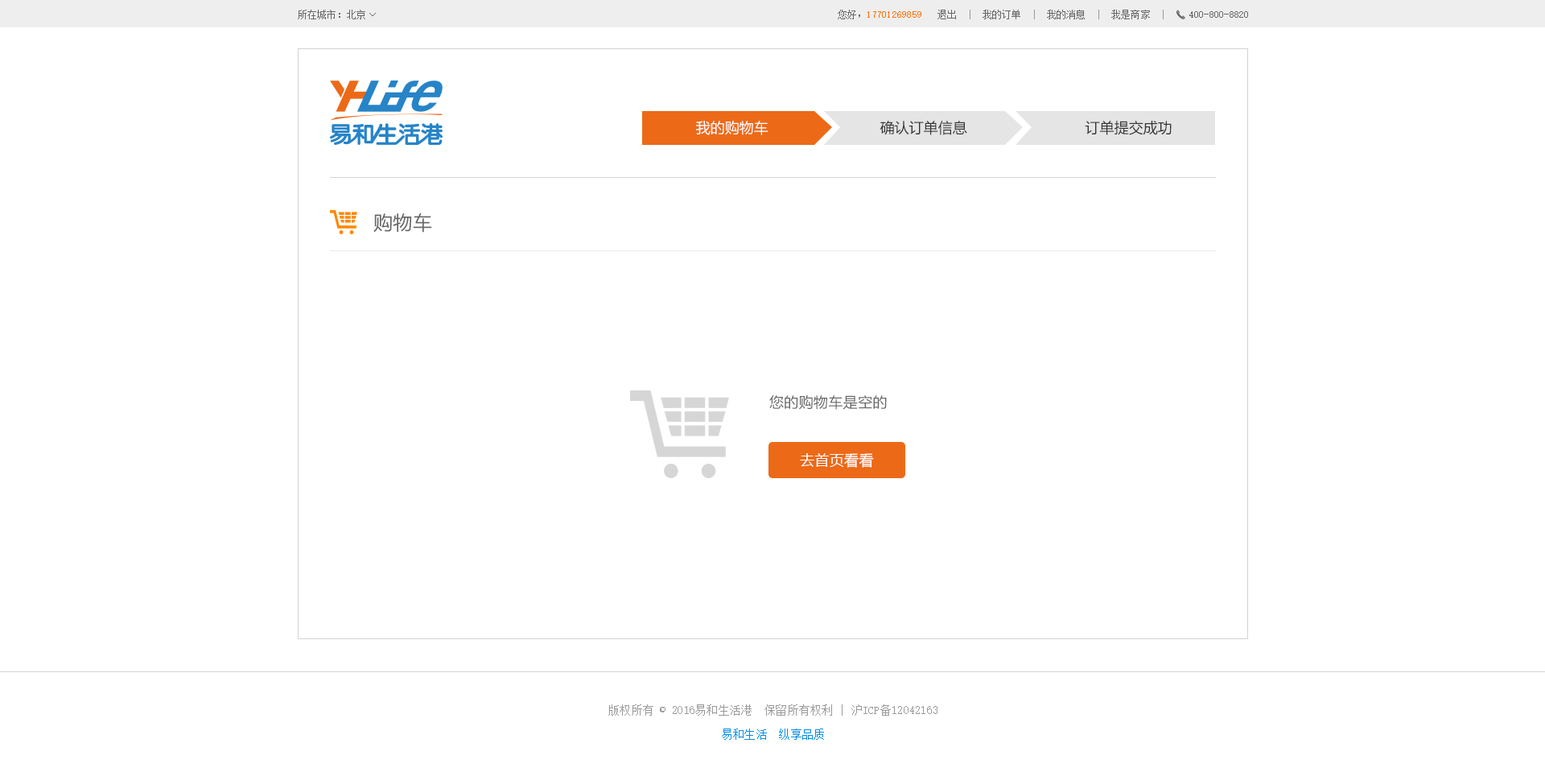
<style>
.page{position:relative;width:1545px;height:772px;background:#ffffff}
.page>*{position:absolute;margin:0}
.t1{font:9.7px "SimSun";letter-spacing:0.02em;color:#666666}
.t2{font:9.7px "SimSun";letter-spacing:0.02em;color:#ff6c00}
.t3{font:9.7px "SimSun";letter-spacing:0.02em;color:#999999}
.t4{font:14.5px "MicrosoftYaHei";color:#fffcfc}
.t5{font:14.5px "MicrosoftYaHei";color:#333333}
.t6{font:19.3px "MicrosoftYaHei";letter-spacing:0.02em;color:#666666}
.t7{font:14.5px "MicrosoftYaHei";letter-spacing:0.02em;color:#666666}
.t8{font:14.5px "MicrosoftYaHei";letter-spacing:0.02em;color:#ffffff}
.t9{font:11.3px/24.1px "SimSun";letter-spacing:0.02em;color:#999999}
.t10{font:11.3px/24.1px "SimSun";letter-spacing:0.02em;color:#008de1}
</style>
<div class="page">
<p class="t1" style="left:298px;top:10px;width:67px;height:9px">所在城市：北京</p>
<p class="t1" style="left:369px;top:13px;width:7px;height:3px">&gt;</p>
<p class="t2" style="left:838px;top:10px;width:326px;height:9px"><span class="t1">您好，</span>17701269859<span class="t1">   退出</span><span class="t3">  |  </span><span class="t1">我的订单</span><span class="t3">  |  </span><span class="t1">我的消息</span><span class="t3">  |  </span><span class="t1">我是商家</span><span class="t3">  |</span></p>
<p class="t1" style="left:1189px;top:11px;width:59px;height:7px">400-800-8820</p>
<p class="t4" style="left:696px;top:121px;width:73px;height:14px">我的购物车</p>
<p class="t5" style="left:880px;top:121px;width:87px;height:14px">确认订单信息</p>
<p class="t5" style="left:1085px;top:121px;width:87px;height:14px">订单提交成功</p>
<p class="t6" style="left:373px;top:212px;width:59px;height:21px">购物车</p>
<p class="t7" style="left:769px;top:395px;width:118px;height:15px">您的购物车是空的</p>
<p class="t8" style="left:800px;top:453px;width:74px;height:15px">去首页看看</p>
<p class="t9" style="left:608px;top:704px;width:330px;height:36px;text-align:center">版权所有 © 2016易和生活港  保留所有权利 | 沪ICP备12042163<br><span class="t10">易和生活  纵享品质</span></p>
</div>
